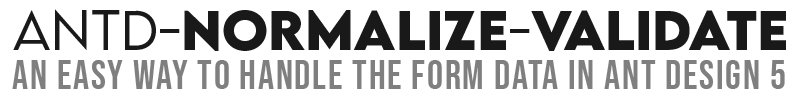
<style>
.page{position:relative;width:800px;height:100px;background:#ffffff}
.page>*{position:absolute;margin:0}
.t1{font:49.9px "LEMONMILK-Bold";color:#191919}
.t2{font:49.9px "LEMONMILK-Light";color:#191919}
.t3{font:40px "BebasNeue-Regular";letter-spacing:0.044em;color:#7f7f7f}
</style>
<div class="page">
<p class="t1" style="left:13px;top:9px;width:773px;height:42px"><span class="t2">antD-</span>normalize<span class="t2">-</span>validate</p>
<p class="t3" style="left:12px;top:60px;width:773px;height:29px">AN easy way to handle the form data IN ANT DESIGN 5</p>
</div>
